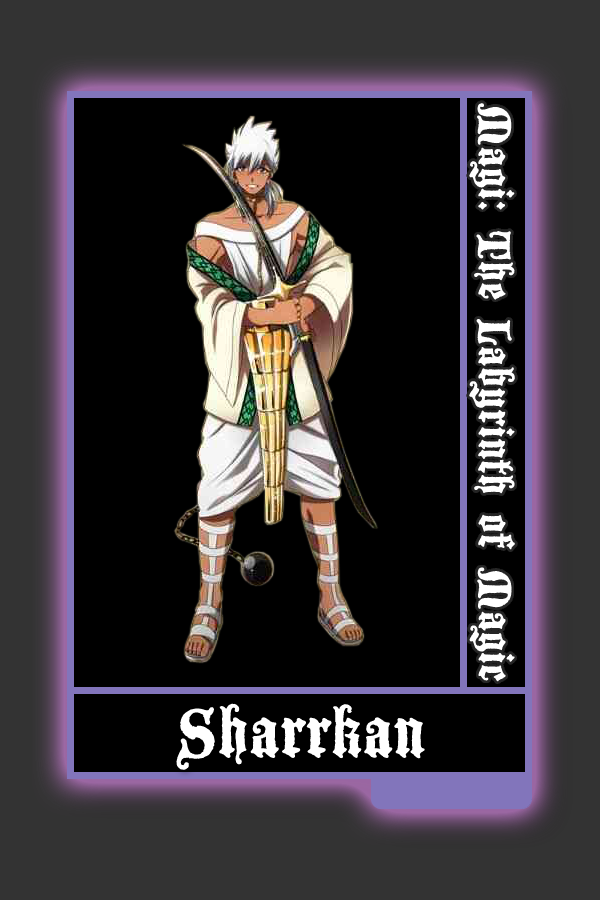
<style>
.page{position:relative;width:600px;height:900px;background:#000000}
.page>*{position:absolute;margin:0}
.t1{font:50px "BlackwoodCastle";color:#ffffff}
.t2{font:75px "BlackwoodCastle";color:#ffffff}
</style>
<div class="page">
<p class="t1" style="left:469px;top:103px;width:46px;height:579px;rotate:90deg">Magi: The Labyrinth of Magic</p>
<p class="t2" style="left:176px;top:703px;width:249px;height:67px">Sharrkan</p>
</div>
